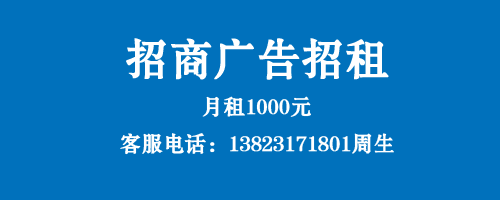
<style>
.page{position:relative;width:500px;height:200px;background:#0071bc}
.page>*{position:absolute;margin:0}
.t1{font:42.9px "FZSHJW--GB1-0";color:#ffffff;font-weight:bold}
.t2{font:21.3px "FZSHJW--GB1-0";color:#ffffff;font-weight:bold}
</style>
<div class="page">
<p class="t1" style="left:126px;top:38px;width:263px;height:42px">招商广告招租</p>
<p class="t2" style="left:202px;top:96px;width:109px;height:21px">月租1000元</p>
<p class="t2" style="left:120px;top:133px;width:274px;height:22px">客服电话：13823171801周生</p>
</div>
